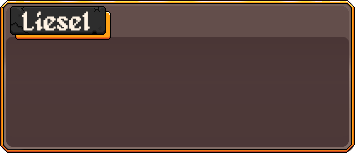
<style>
.page{position:relative;width:355px;height:153px;background:#4d3938}
.page>*{position:absolute;margin:0}
.t1{font:27px "Alagard";color:#fff3e4}
</style>
<div class="page">
<p class="t1" style="left:22px;top:11px;width:68px;height:20px">Liesel</p>
</div>
